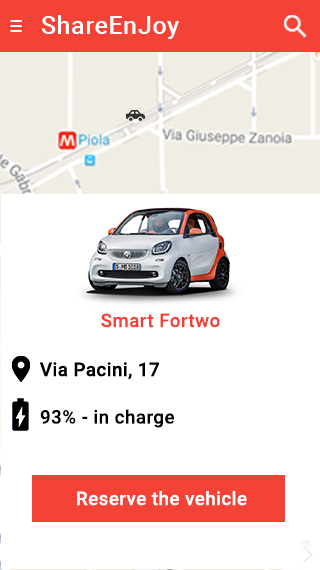
<style>
.page{position:relative;width:320px;height:570px;background:#ffffff}
.page>*{position:absolute;margin:0}
.t1{font:25px "Roboto-Medium";letter-spacing:0.025em;color:#ffffff}
.t2{font:18.8px "Roboto-Medium";letter-spacing:0.025em;color:#f44336}
.t3{font:18.8px "Roboto-Medium";letter-spacing:0.025em;color:#000000}
.t4{font:18.8px "Roboto-Medium";letter-spacing:0.025em;color:#ffffff}
</style>
<div class="page">
<p class="t1" style="left:41px;top:15px;width:138px;height:24px">ShareEnJoy</p>
<p class="t2" style="left:101px;top:313px;width:119px;height:15px">Smart Fortwo</p>
<p class="t3" style="left:40px;top:409px;width:134px;height:19px">93% - in charge</p>
<p class="t4" style="left:77px;top:491px;width:170px;height:15px">Reserve the vehicle</p>
</div>
